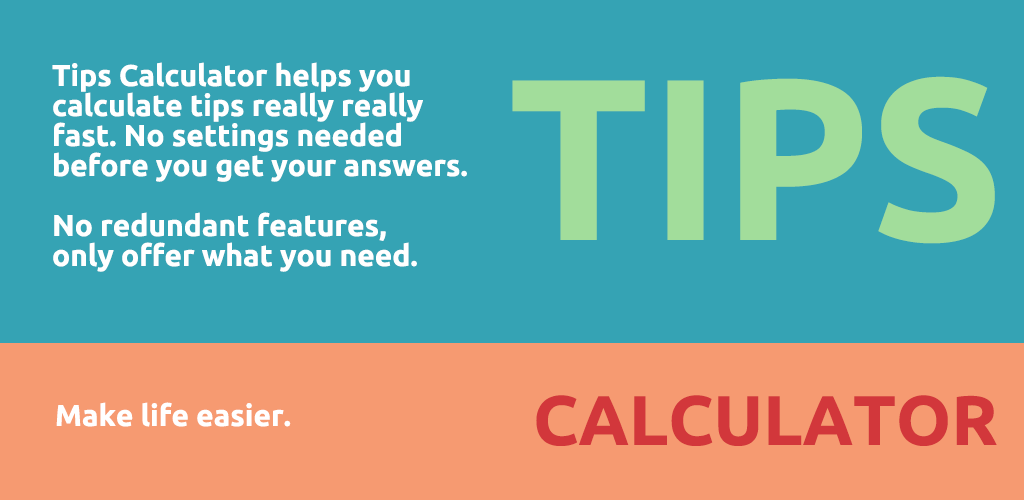
<style>
.page{position:relative;width:1024px;height:500px;background:#35a3b4}
.page>*{position:absolute;margin:0}
.t1{font:30px/30px "Ubuntu-Bold";color:#ffffff}
.t2{font:230px "Ubuntu-Bold";color:#a2dd9b}
.t3{font:70px "Ubuntu-Bold";color:#d2373b}
.t4{font:30px "Ubuntu-Bold";color:#ffffff}
</style>
<div class="page">
<p class="t1" style="left:52px;top:62px;width:415px;height:210px">Tips Calculator helps you<br>calculate tips really really <br>fast. No settings needed <br>before you get your answers. <br><br>No redundant features, <br>only offer what you need.</p>
<p class="t2" style="left:512px;top:76px;width:483px;height:168px">TIPS</p>
<p class="t3" style="left:536px;top:395px;width:461px;height:51px">CALCULATOR</p>
<p class="t4" style="left:56px;top:402px;width:235px;height:25px">Make life easier.</p>
</div>
